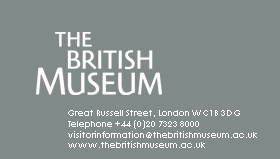
<style>
.page{position:relative;width:280px;height:159px;background:#808a88}
.page>*{position:absolute;margin:0}
.t1{font:9px "CenturyGothic";color:#ffffff}
</style>
<div class="page">
<p class="t1" style="left:68px;top:110px;width:189px;height:38px">Great Russell Street, London WC1B 3DG<br>Telephone +44 (0)20 7323 8000<br>visitorinformation@thebritishmuseum.ac.uk<br>www.thebritishmuseum.ac.uk</p>
</div>
